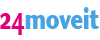
<style>
.page{position:relative;width:100px;height:40px;background:#ffffff}
.page>*{position:absolute;margin:0}
.t1{font:31.7px "StoneSansOSITCTTBold";letter-spacing:-0.04em;color:#e1007a;scale:0.7 1}
.t2{font:29px "StoneSansOSITCTTBold";letter-spacing:-0.04em;color:#46a3e4;scale:0.76 1}
.t3{font:29px "StoneSansOSITCTTBold";letter-spacing:-0.04em;color:#46a3e4;font-style:italic;scale:0.76 1}
</style>
<div class="page">
<p class="t1" style="left:0px;top:13px;width:25px;height:22px">24</p>
<p class="t2" style="left:25px;top:7px;width:74px;height:22px"><span class="t3">     </span>moveit</p>
</div>
